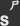
<style>
.page{position:relative;width:20px;height:26px;background:#333333}
.page>*{position:absolute;margin:0}
.t1{font:12px "DFKaiShu-SB-Estd-BF";color:#ececec;font-weight:bold}
.t2{font:18px "ArialMT";color:#ececec;font-weight:bold}
</style>
<div class="page">
<p class="t1" style="left:10px;top:0px;width:9px;height:11px">尸</p>
<p class="t2" style="left:0px;top:15px;width:9px;height:11px">s</p>
</div>
